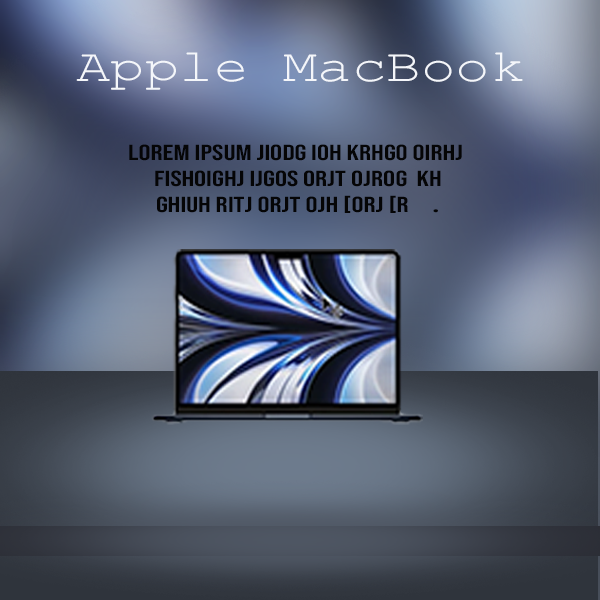
<style>
.page{position:relative;width:600px;height:600px}
.page>*{position:absolute;margin:0}
.t1{font:46.4px "CourierNewPSMT";color:#f4f6fa;scale:1.24 1}
.t2{font:21.6px "BebasNeue-Regular";color:#050506;scale:1.39 1}
.t3{font:21.6px "CourierNewPSMT";color:#050506;scale:1.39 1}
</style>
<div class="page">
<p class="t1" style="left:76px;top:52px;width:447px;height:38px">Apple MacBook</p>
<p class="t2" style="left:129px;top:144px;width:333px;height:69px;text-align:center">lorem ipsum jiodg ioh krhgo oirhj <br>fishoighj ijgos orjt ojrog  kh<br> ghiuh ritj orjt ojh [orj [r<span class="t3"> .</span></p>
</div>
